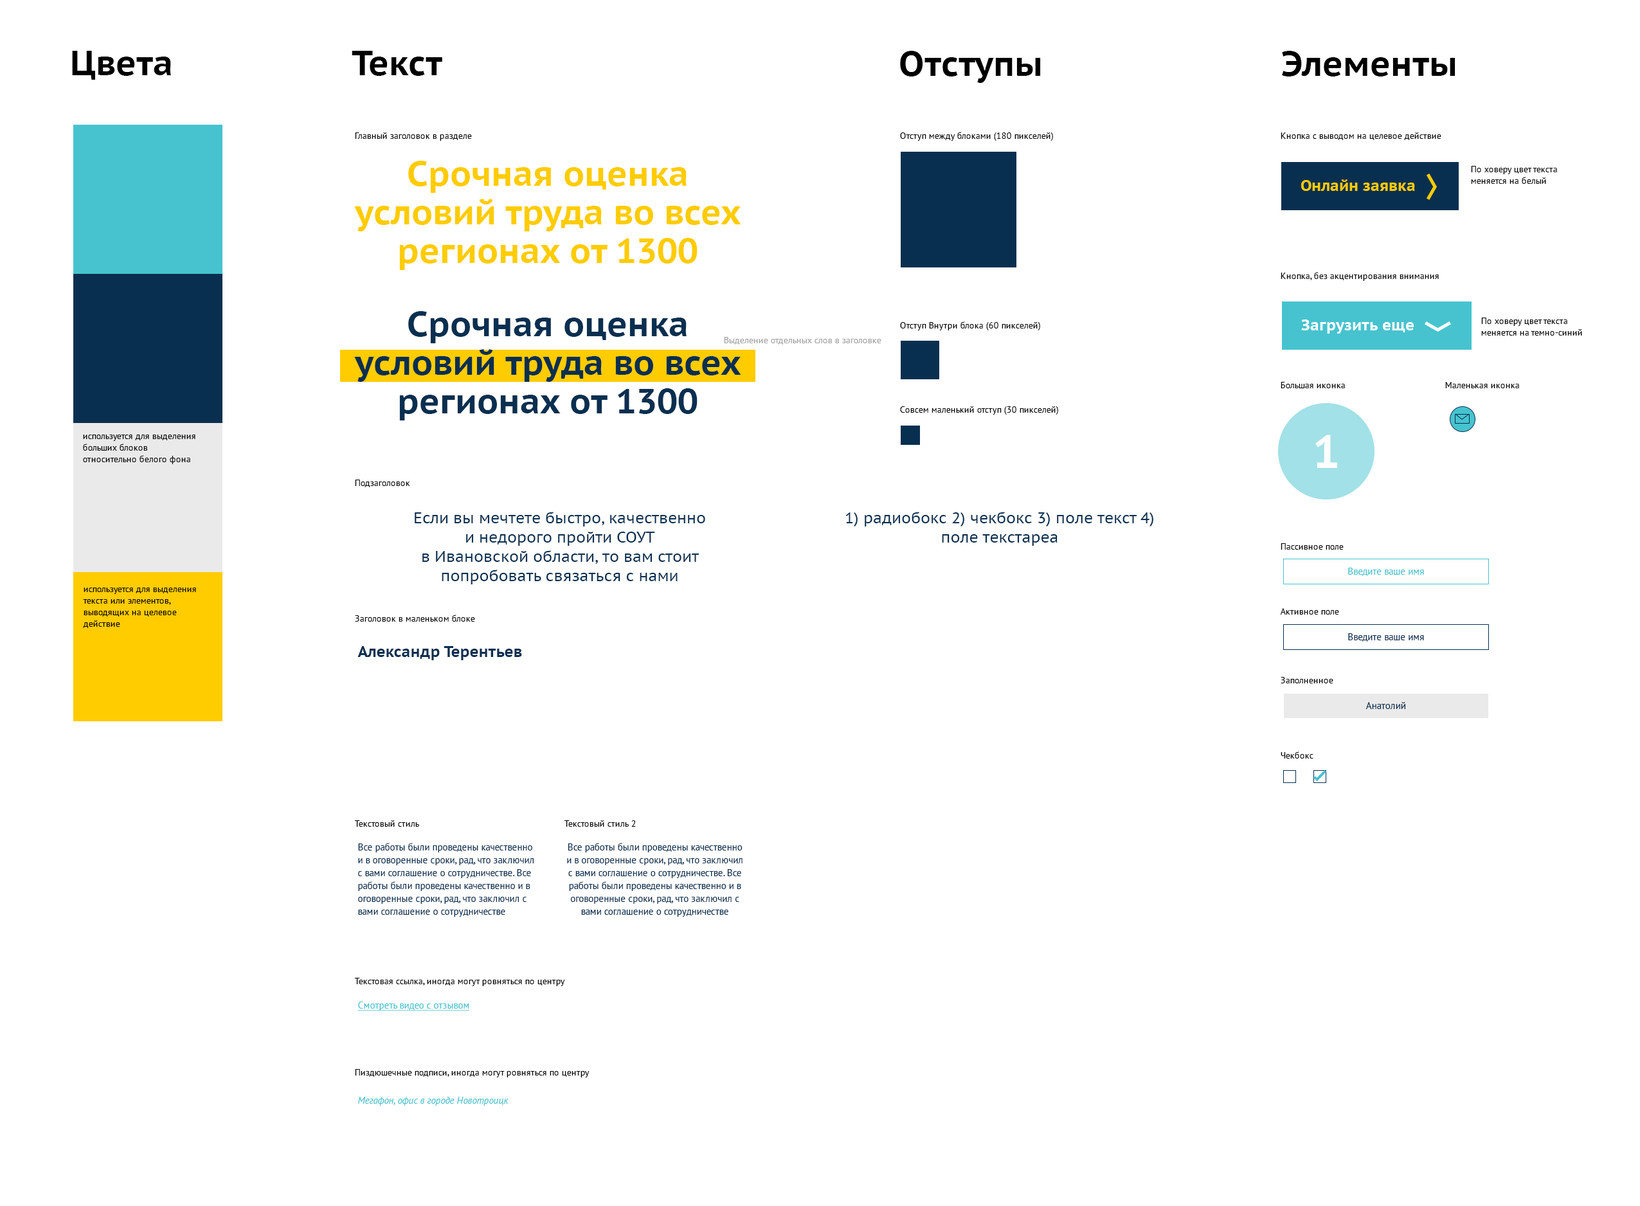
<style>
.page{position:relative;width:1640px;height:1206px;background:#ffffff}
.page>*{position:absolute;margin:0}
.t1{font:34.7px "PTSans-CaptionBold";color:#000000}
.t2{font:9px "PTSans-Regular";color:#000000}
.t3{font:34.7px/38.6px "PTSans-CaptionBold";color:#ffcc00}
.t4{font:9px/11.6px "PTSans-Regular";color:#000000}
.t5{font:15.4px "PTSans-CaptionBold";color:#ffcc00}
.t6{font:34.7px/38.6px "PTSans-CaptionBold";color:#092f50}
.t7{font:15.4px "PTSans-CaptionBold";color:#ffffff}
.t8{font:9px "PTSans-Regular";color:#a3a3a3}
.t9{font:15.4px/19.3px "PTSans-Caption";color:#092f50}
.t10{font:9.6px "PTSans-Regular";color:#46c3cf}
.t11{font:9.6px "PTSans-Regular";color:#092f50}
.t12{font:15.4px "PTSans-CaptionBold";color:#092f50}
.t13{font:9.6px/12.9px "PTSans-Regular";color:#092f50}
.t14{font:9.6px "PTSans-Regular";color:#46c3cf;text-decoration:underline}
.t15{font:9.6px "PTSans-Italic";color:#46c3cf}
</style>
<div class="page">
<p class="t1" style="left:72px;top:51px;width:99px;height:29px">Цвета</p>
<p class="t1" style="left:352px;top:51px;width:90px;height:25px">Текст</p>
<p class="t1" style="left:900px;top:51px;width:141px;height:32px">Отступы</p>
<p class="t1" style="left:1282px;top:51px;width:173px;height:25px">Элементы</p>
<p class="t2" style="left:355px;top:132px;width:117px;height:9px">Главный заголовок в разделе</p>
<p class="t2" style="left:900px;top:132px;width:153px;height:9px">Отступ между блоками (180 пикселей)</p>
<p class="t2" style="left:1281px;top:132px;width:160px;height:8px">Кнопка с выводом на целевое действие</p>
<p class="t3" style="left:354px;top:161px;width:387px;height:109px;text-align:center">Срочная оценка <br>условий труда во всех регионах от 1300</p>
<p class="t4" style="left:1471px;top:166px;width:86px;height:18px">По ховеру цвет текста <br>меняется на белый</p>
<p class="t5" style="left:1300px;top:179px;width:115px;height:12px">Онлайн заявка</p>
<p class="t2" style="left:1281px;top:272px;width:158px;height:9px">Кнопка, без акцентирования внимания</p>
<p class="t6" style="left:354px;top:311px;width:387px;height:109px;text-align:center">Срочная оценка <br>условий труда во всех регионах от 1300</p>
<p class="t4" style="left:1481px;top:318px;width:101px;height:18px">По ховеру цвет текста <br>меняется на темно-синий</p>
<p class="t2" style="left:900px;top:321px;width:140px;height:9px">Отступ Внутри блока (60 пикселей)</p>
<p class="t7" style="left:1301px;top:320px;width:113px;height:14px">Загрузить еще</p>
<p class="t8" style="left:724px;top:337px;width:157px;height:8px">Выделение отдельных слов в заголовке</p>
<p class="t2" style="left:1281px;top:382px;width:64px;height:6px">Большая иконка</p>
<p class="t2" style="left:1445px;top:382px;width:74px;height:6px">Маленькая иконка</p>
<p class="t2" style="left:900px;top:406px;width:158px;height:9px">Совсем маленький отступ (30 пикселей)</p>
<p class="t4" style="left:83px;top:435px;width:112px;height:29px">используется для выделения <br>больших блоков <br>относительно белого фона</p>
<p class="t2" style="left:355px;top:480px;width:55px;height:7px">Подзаголовок</p>
<p class="t9" style="left:415px;top:512px;width:290px;height:72px;text-align:center">Если вы мечтете быстро, качественно и недорого пройти СОУТ <br>в Ивановской области, то вам стоит попробовать связаться с нами</p>
<p class="t9" style="left:845px;top:512px;width:308px;height:34px;text-align:center">1) радиобокс 2) чекбокс 3) поле текст 4) поле текстареа</p>
<p class="t2" style="left:1281px;top:543px;width:63px;height:7px">Пассивное поле</p>
<p class="t10" style="left:1348px;top:568px;width:76px;height:8px">Введите ваше имя</p>
<p class="t4" style="left:83px;top:588px;width:113px;height:40px">используется для выделения <br>текста или элементов, <br>выводящих на целевое <br>действие</p>
<p class="t2" style="left:355px;top:615px;width:120px;height:7px">Заголовок в маленьком блоке</p>
<p class="t2" style="left:1280px;top:608px;width:59px;height:7px">Активное поле</p>
<p class="t11" style="left:1348px;top:633px;width:76px;height:9px">Введите ваше имя</p>
<p class="t12" style="left:357px;top:646px;width:165px;height:14px">Александр Терентьев</p>
<p class="t2" style="left:1281px;top:677px;width:52px;height:6px">Заполненное</p>
<p class="t11" style="left:1365px;top:702px;width:40px;height:7px">Анатолий</p>
<p class="t2" style="left:1281px;top:752px;width:32px;height:7px">Чекбокс</p>
<p class="t2" style="left:354px;top:820px;width:65px;height:7px">Текстовый стиль</p>
<p class="t2" style="left:564px;top:820px;width:72px;height:7px">Текстовый стиль 2</p>
<p class="t13" style="left:358px;top:843px;width:176px;height:74px">Все работы были проведены качественно и в оговоренные сроки, рад, что заключил с вами соглашение о сотрудничестве. Все работы были проведены качественно и в оговоренные сроки, рад, что заключил с вами соглашение о сотрудничестве</p>
<p class="t13" style="left:567px;top:843px;width:175px;height:74px;text-align:center">Все работы были проведены качественно и в оговоренные сроки, рад, что заключил с вами соглашение о сотрудничестве. Все работы были проведены качественно и в оговоренные сроки, рад, что заключил с вами соглашение о сотрудничестве</p>
<p class="t2" style="left:354px;top:978px;width:211px;height:8px">Текстовая ссылка, иногда могут ровняться по центру</p>
<p class="t14" style="left:357px;top:1002px;width:113px;height:9px">Смотреть видео с отзывом</p>
<p class="t2" style="left:355px;top:1069px;width:235px;height:8px">Пиздюшечные подписи, иногда могут ровняться по центру</p>
<p class="t15" style="left:358px;top:1097px;width:151px;height:9px">Мегафон, офис в городе Новотроицк</p>
</div>
